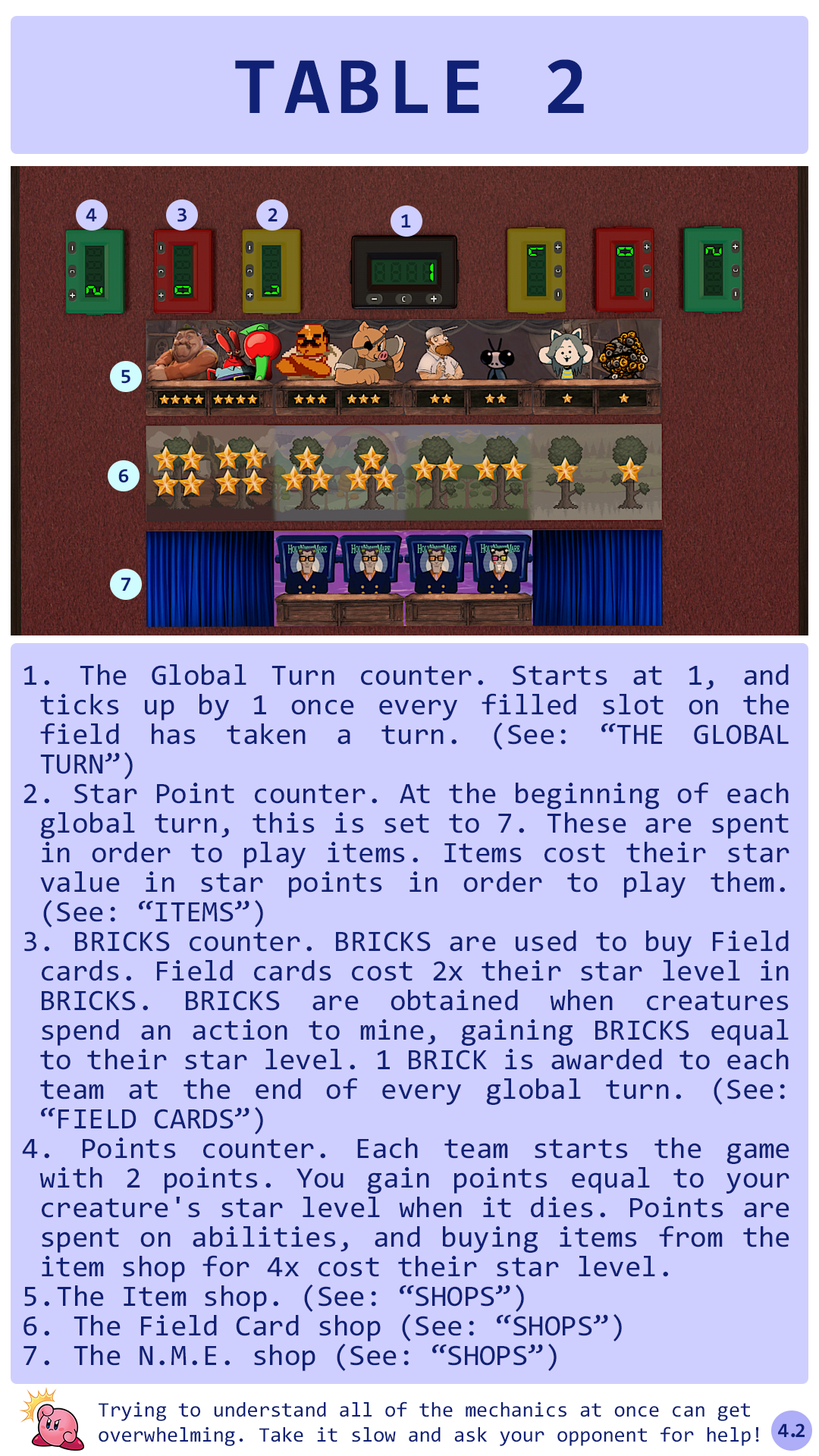
<style>
.page{position:relative;width:819px;height:1456px;background:#cfcfff}
.page>*{position:absolute;margin:0}
.t1{font:82.2px "Consolas-Bold";letter-spacing:0.08em;color:#102175}
.t2{font:20.5px "Consolas-Bold";color:#102175}
.t3{font:20.6px "Consolas-Bold";color:#102175}
.t4{font:29.6px/29.6px "Consolas";color:#102175}
.t5{font:20.9px "Consolas";color:#102175}
.t6{font:20.5px "Consolas-Bold";letter-spacing:-0.06em;color:#102175}
.t7{font:20.5px "Consolas-Bold";letter-spacing:-0.22em;color:#102175}
</style>
<div class="page">
<p class="t1" style="left:235px;top:59px;width:349px;height:54px">TABLE 2</p>
<p class="t2" style="left:86px;top:208px;width:11px;height:13px">4</p>
<p class="t3" style="left:177px;top:208px;width:10px;height:14px">3</p>
<p class="t2" style="left:268px;top:208px;width:10px;height:13px">2</p>
<p class="t2" style="left:401px;top:214px;width:10px;height:13px">1</p>
<p class="t2" style="left:121px;top:369px;width:9px;height:15px">5</p>
<p class="t2" style="left:118px;top:469px;width:11px;height:14px">6</p>
<p class="t2" style="left:121px;top:577px;width:9px;height:14px">7</p>
<p class="t4" style="left:22px;top:664px;width:767px;height:707px;text-align:justify">The Global Turn counter. Starts at 1, and ticks up by 1 once every filled slot on the field has taken a turn. (See: “THE GLOBAL TURN”)<br> Star Point counter. At the beginning of each global turn, this is set to 7. These are spent in order to play items. Items cost their star value in star points in order to play them. (See: “ITEMS”)<br> BRICKS counter. BRICKS are used to buy Field cards. Field cards cost 2x their star level in BRICKS. BRICKS are obtained when creatures spend an action to mine, gaining BRICKS equal to their star level. 1 BRICK is awarded to each team at the end of every global turn. (See: “FIELD CARDS”)<br> Points counter. Each team starts the game with 2 points. You gain points equal to your creature's star level when it dies. Points are spent on abilities, and buying items from the item shop for 4x cost their star level.<br>The Item shop. (See: “SHOPS”)<br> The Field Card shop (See: “SHOPS”)<br> The N.M.E. shop (See: “SHOPS”)</p>
<p class="t5" style="left:99px;top:1401px;width:660px;height:45px">Trying to understand all of the mechanics at once can get <br>overwhelming. Take it slow and ask your opponent for help!</p>
<p class="t6" style="left:778px;top:1423px;width:27px;height:15px">4<span class="t7">.</span>2</p>
</div>
